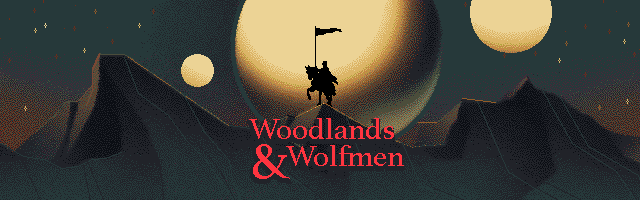
<style>
.page{position:relative;width:640px;height:200px;background:#26393a}
.page>*{position:absolute;margin:0}
.t1{font:30.9px "Athelas-Regular";color:#ff343f}
.t2{font:54.5px "Athelas-Regular";color:#ff343f}
</style>
<div class="page">
<p class="t1" style="left:249px;top:118px;width:145px;height:21px">Woodlands</p>
<p class="t2" style="left:253px;top:144px;width:37px;height:35px">&amp;</p>
<p class="t1" style="left:286px;top:145px;width:118px;height:21px">Wolfmen</p>
</div>
